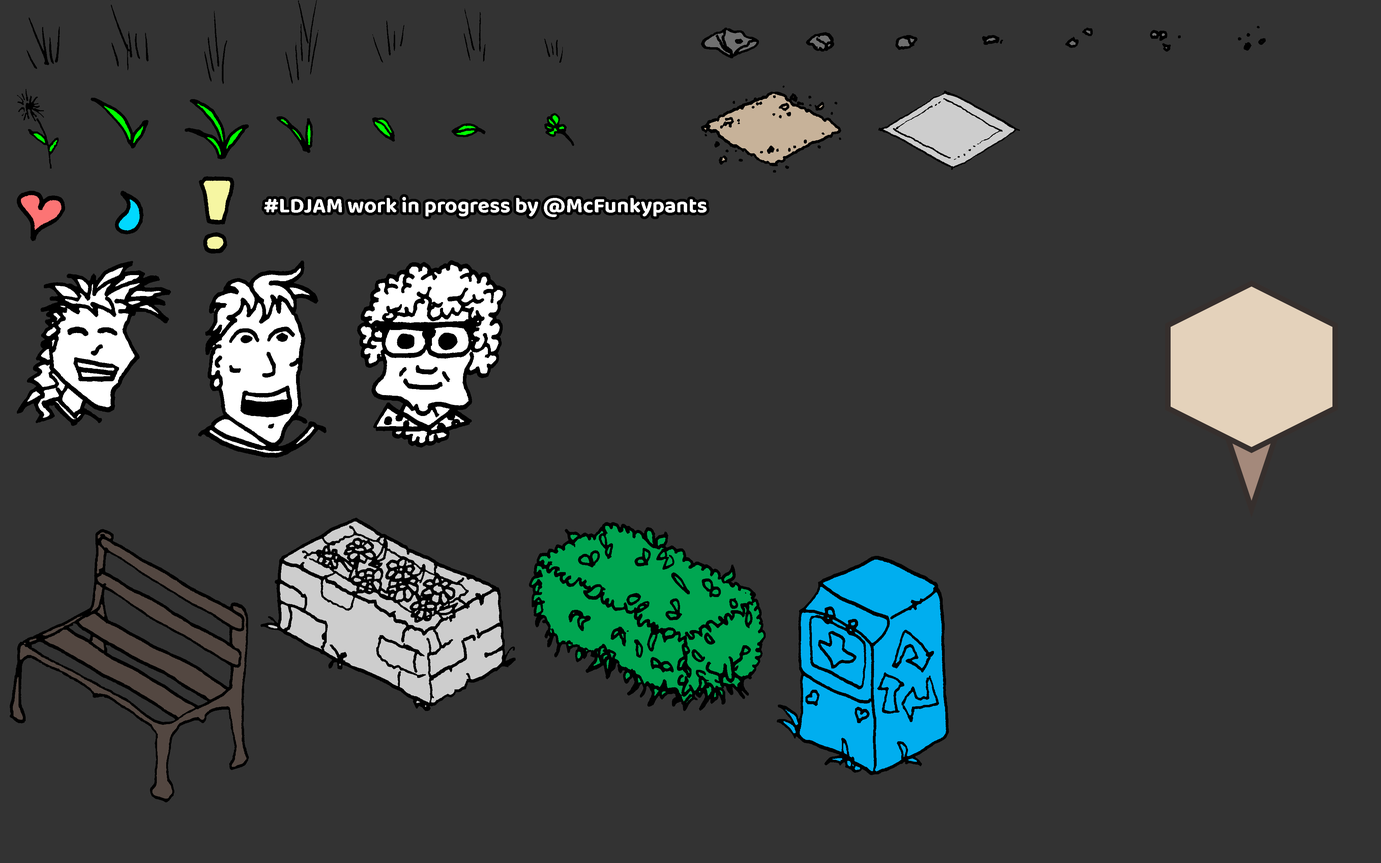
<style>
.page{position:relative;width:1381px;height:863px;background:#333333}
.page>*{position:absolute;margin:0}
.t1{font:21.6px "BalooBhaina2-Bold";color:#ffffff}
</style>
<div class="page">
<p class="t1" style="left:264px;top:197px;width:443px;height:20px">#LDJAM work in progress by @McFunkypants</p>
</div>
